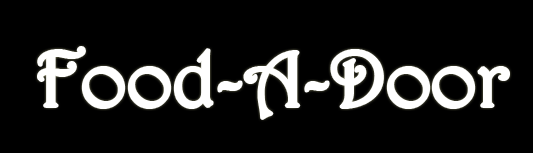
<style>
.page{position:relative;width:533px;height:153px;background:#000000}
.page>*{position:absolute;margin:0}
.t1{font:79px "Harrington";color:#ffffff}
</style>
<div class="page">
<p class="t1" style="left:39px;top:48px;width:469px;height:70px">Food-A-Door</p>
</div>
